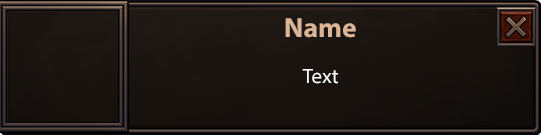
<style>
.page{position:relative;width:541px;height:135px}
.page>*{position:absolute;margin:0}
.t1{font:27.7px "MyriadPro-Bold";color:#dab597}
.t2{font:20.8px "MyriadPro-Regular";color:#ffffff}
</style>
<div class="page">
<p class="t1" style="left:285px;top:18px;width:71px;height:20px">Name</p>
<p class="t2" style="left:302px;top:69px;width:36px;height:15px">Text</p>
</div>
